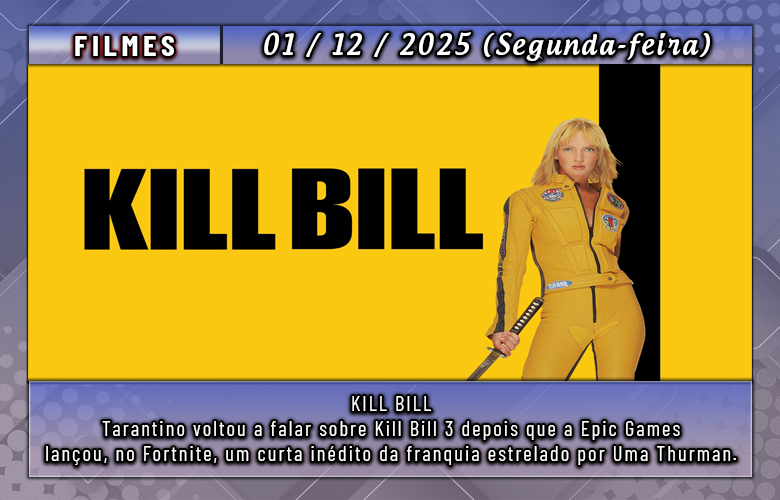
<style>
.page{position:relative;width:780px;height:500px;background:#fac811}
.page>*{position:absolute;margin:0}
.t1{font:28.3px "BarlowCondensed-Bold";letter-spacing:0.15em;color:#ffffff;scale:1.09 1}
.t2{font:28.3px "AndrogyneMedium";letter-spacing:0.1em;color:#ffffff;scale:0.92 1}
.t3{font:20.9px/24.8px "BarlowCondensed-Regular";letter-spacing:0.1em;color:#ffffff}
</style>
<div class="page">
<p class="t1" style="left:75px;top:36px;width:99px;height:20px">FILMES</p>
<p class="t2" style="left:264px;top:32px;width:446px;height:29px">01 / 12 / 2025 (Segunda-feira)</p>
<p class="t3" style="left:46px;top:396px;width:690px;height:69px;text-align:center">KILL BILL<br>Tarantino voltou a falar sobre Kill Bill 3 depois que a Epic Games<br>lançou, no Fortnite, um curta inédito da franquia estrelado por Uma Thurman.</p>
</div>
